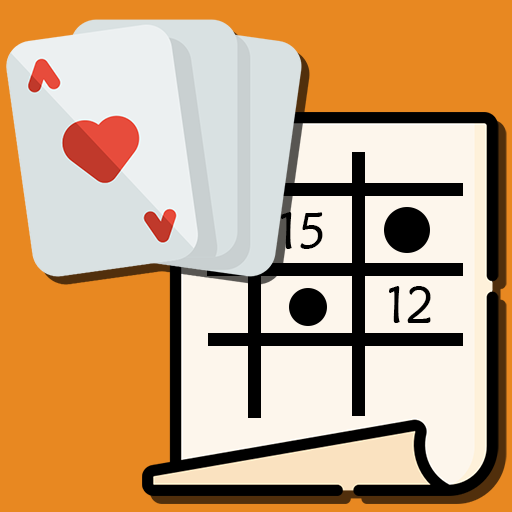
<style>
.page{position:relative;width:512px;height:512px;background:#e88821}
.page>*{position:absolute;margin:0}
.t1{font:53.3px "MaiandraGD-Regular";color:#000000;scale:0.94 1}
</style>
<div class="page">
<p class="t1" style="left:281px;top:212px;width:42px;height:37px">15</p>
<p class="t1" style="left:389px;top:286px;width:42px;height:37px">12</p>
</div>
